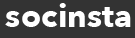
<style>
.page{position:relative;width:135px;height:38px;background:#333333}
.page>*{position:absolute;margin:0}
.t1{font:32.4px "AvenirNext-Bold";color:#ffffff}
</style>
<div class="page">
<p class="t1" style="left:5px;top:3px;width:126px;height:24px">socinsta</p>
</div>
